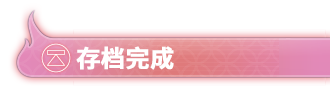
<style>
.page{position:relative;width:330px;height:90px;background:#ffffff}
.page>*{position:absolute;margin:0}
.t1{font:24px "SourceHanSansSC-Bold";color:#ffffff;font-weight:bold}
</style>
<div class="page">
<p class="t1" style="left:76px;top:46px;width:98px;height:24px">存档完成</p>
</div>
